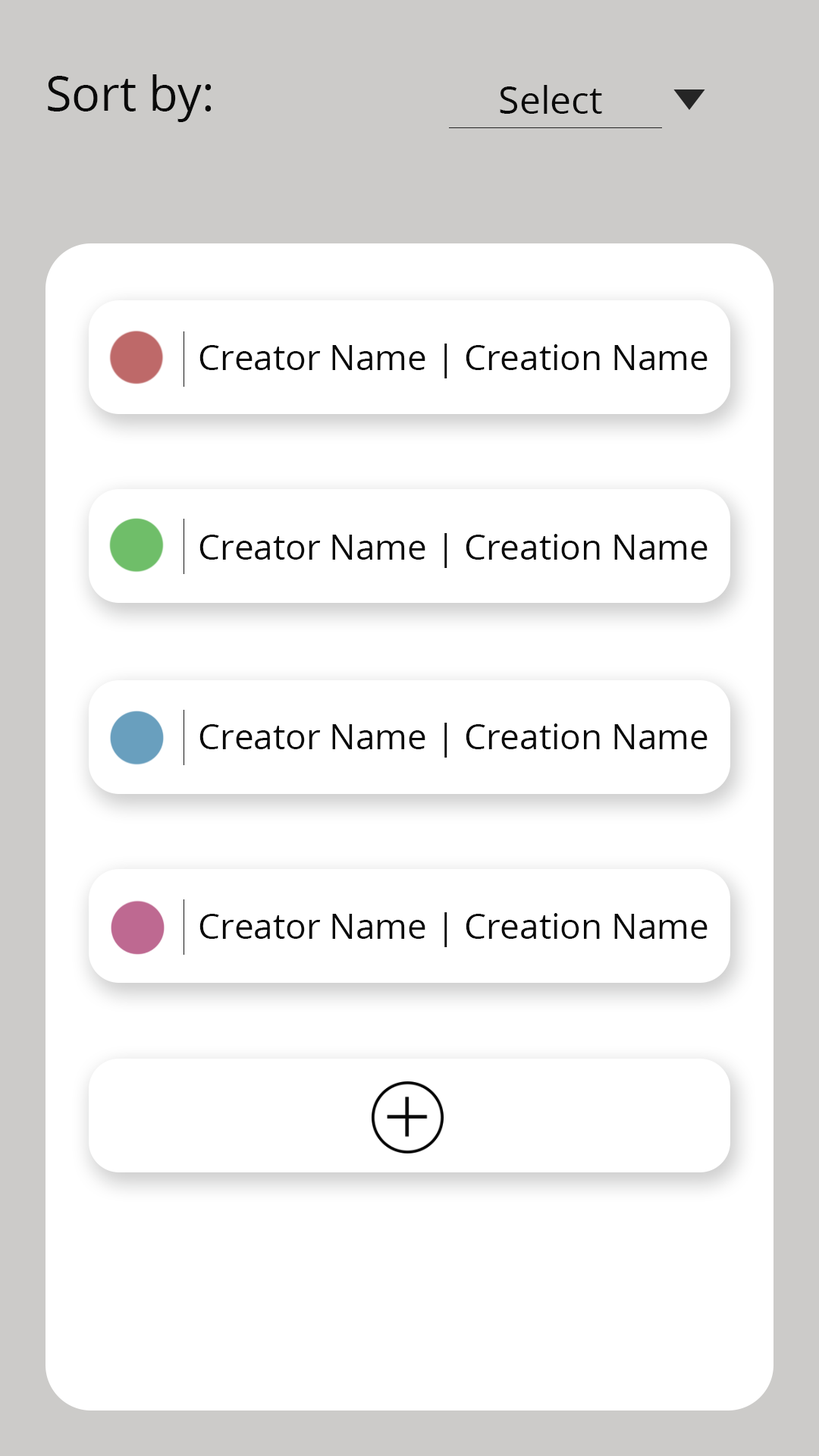
<style>
.page{position:relative;width:819px;height:1456px;background:#ffffff}
.page>*{position:absolute;margin:0}
.t1{font:47.4px "OpenSans";color:#0a0a0a}
.t2{font:37.9px "OpenSans";color:#0a0a0a}
.t3{font:34.8px "OpenSans";color:#0a0a0a}
</style>
<div class="page">
<p class="t1" style="left:48px;top:74px;width:164px;height:48px">Sort by:</p>
<p class="t2" style="left:500px;top:85px;width:102px;height:29px">Select</p>
<p class="t3" style="left:199px;top:344px;width:509px;height:34px">Creator Name | Creation Name</p>
<p class="t3" style="left:199px;top:533px;width:509px;height:35px">Creator Name | Creation Name</p>
<p class="t3" style="left:199px;top:723px;width:509px;height:35px">Creator Name | Creation Name</p>
<p class="t3" style="left:199px;top:912px;width:509px;height:35px">Creator Name | Creation Name</p>
</div>
